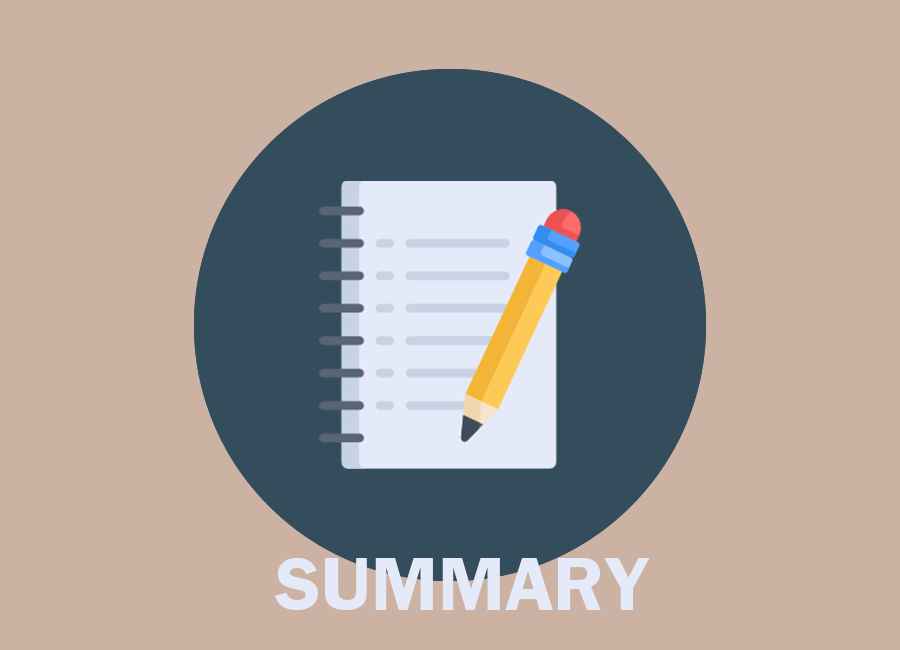
<style>
.page{position:relative;width:900px;height:650px;background:#ccb2a3}
.page>*{position:absolute;margin:0}
.t1{font:120.6px "FreesiaUPCBold";color:#e4eaf8}
</style>
<div class="page">
<p class="t1" style="left:275px;top:558px;width:375px;height:52px">SUMMARY</p>
</div>
